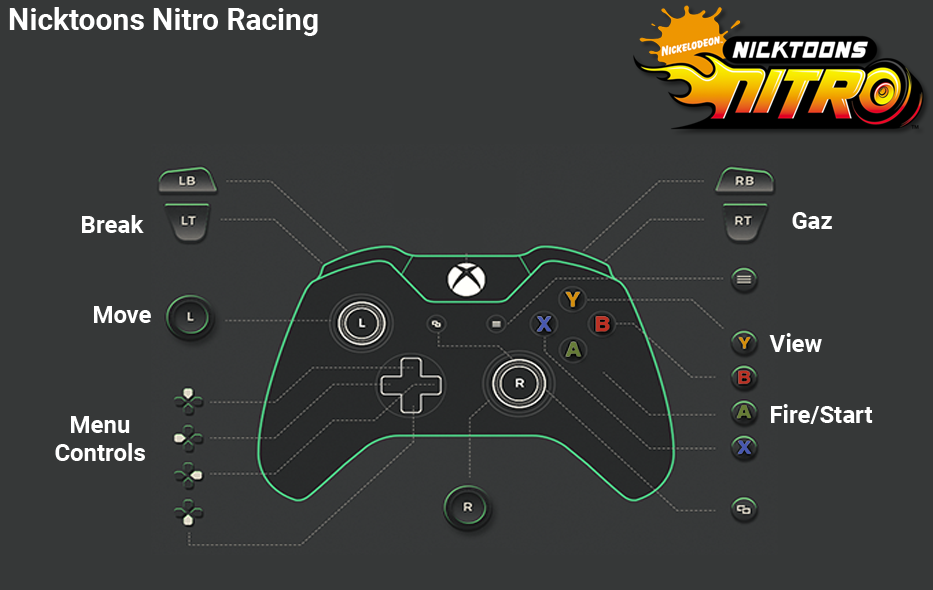
<style>
.page{position:relative;width:933px;height:590px;background:#363838}
.page>*{position:absolute;margin:0}
.t1{font:30px "Roboto-Bold";color:#ffffff}
.t2{font:24px "Roboto-Bold";color:#ffffff}
.t3{font:24px/28px "Roboto-Bold";color:#ffffff}
</style>
<div class="page">
<p class="t1" style="left:9px;top:7px;width:309px;height:29px">Nicktoons Nitro Racing</p>
<p class="t2" style="left:82px;top:215px;width:62px;height:18px">Break</p>
<p class="t2" style="left:792px;top:212px;width:40px;height:17px">Gaz</p>
<p class="t2" style="left:94px;top:306px;width:57px;height:17px">Move</p>
<p class="t2" style="left:769px;top:333px;width:53px;height:19px">View</p>
<p class="t2" style="left:771px;top:404px;width:102px;height:20px">Fire/Start</p>
<p class="t3" style="left:55px;top:416px;width:90px;height:45px;text-align:center">Menu<br>Controls</p>
</div>
